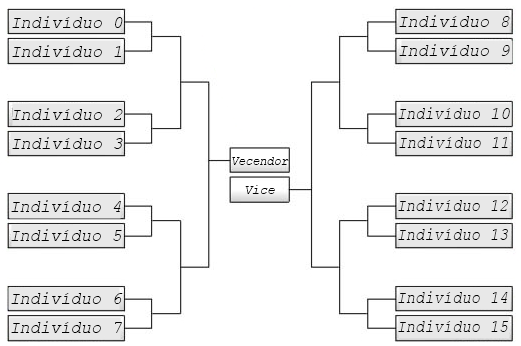
<style>
.page{position:relative;width:521px;height:346px;background:#ffffff}
.page>*{position:absolute;margin:0}
.t1{font:17px "CourierNewPS-ItalicMT";color:#000000}
.t2{font:16.9px "CourierNewPS-ItalicMT";color:#000000}
.t3{font:17px "CourierNewPS-ItalicMT";color:#000000;scale:0.91 1}
.t4{font:13px "CourierNewPS-ItalicMT";color:#000000;scale:0.91 1}
.t5{font:14px "CourierNewPS-ItalicMT";color:#000000;scale:0.91 1}
.t6{font:16.9px "CourierNewPS-ItalicMT";color:#000000;scale:0.91 1}
</style>
<div class="page">
<p class="t1" style="left:12px;top:16px;width:111px;height:12px">Indivíduo 0</p>
<p class="t1" style="left:399px;top:15px;width:111px;height:12px">Indivíduo 8</p>
<p class="t2" style="left:12px;top:45px;width:109px;height:12px">Indivíduo 1</p>
<p class="t2" style="left:399px;top:44px;width:111px;height:12px">Indivíduo 9</p>
<p class="t1" style="left:12px;top:108px;width:111px;height:12px">Indivíduo 2</p>
<p class="t3" style="left:398px;top:107px;width:112px;height:12px">Indivíduo <span class="t1">10</span></p>
<p class="t1" style="left:12px;top:137px;width:111px;height:12px">Indivíduo 3</p>
<p class="t3" style="left:399px;top:136px;width:109px;height:12px">Indivíduo 11</p>
<p class="t4" style="left:232px;top:157px;width:57px;height:8px">Vecendor</p>
<p class="t5" style="left:245px;top:185px;width:30px;height:9px">Vice</p>
<p class="t1" style="left:11px;top:200px;width:110px;height:12px">Indivíduo 4</p>
<p class="t3" style="left:398px;top:199px;width:110px;height:12px">Indivíduo 12</p>
<p class="t2" style="left:11px;top:229px;width:111px;height:12px">Indivíduo 5</p>
<p class="t6" style="left:398px;top:228px;width:110px;height:12px">Indivíduo 13</p>
<p class="t1" style="left:11px;top:292px;width:112px;height:12px">Indivíduo 6</p>
<p class="t3" style="left:398px;top:291px;width:110px;height:12px">Indivíduo 14</p>
<p class="t1" style="left:11px;top:321px;width:111px;height:12px">Indivíduo 7</p>
<p class="t3" style="left:398px;top:320px;width:110px;height:12px">Indivíduo 15</p>
</div>
